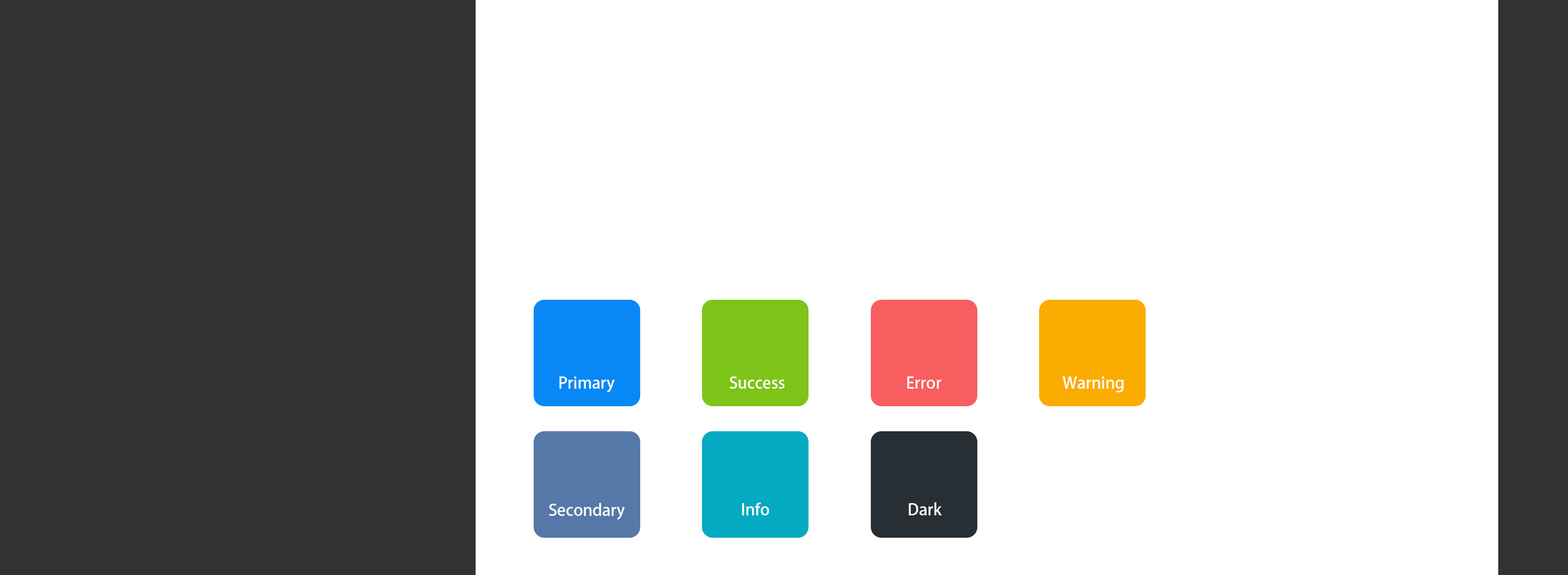
<style>
.page{position:relative;width:1568px;height:575px;background:#ffffff}
.page>*{position:absolute;margin:0}
.t1{font:16px "AdobeHeitiStd-Regular";color:#ffffff}
</style>
<div class="page">
<p class="t1" style="left:559px;top:377px;width:56px;height:16px">Primary</p>
<p class="t1" style="left:730px;top:377px;width:55px;height:12px">Success</p>
<p class="t1" style="left:907px;top:377px;width:35px;height:12px">Error</p>
<p class="t1" style="left:1063px;top:377px;width:61px;height:16px">Warning</p>
<p class="t1" style="left:549px;top:503px;width:76px;height:17px">Secondary</p>
<p class="t1" style="left:742px;top:503px;width:27px;height:13px">Info</p>
<p class="t1" style="left:909px;top:502px;width:33px;height:14px">Dark</p>
</div>
